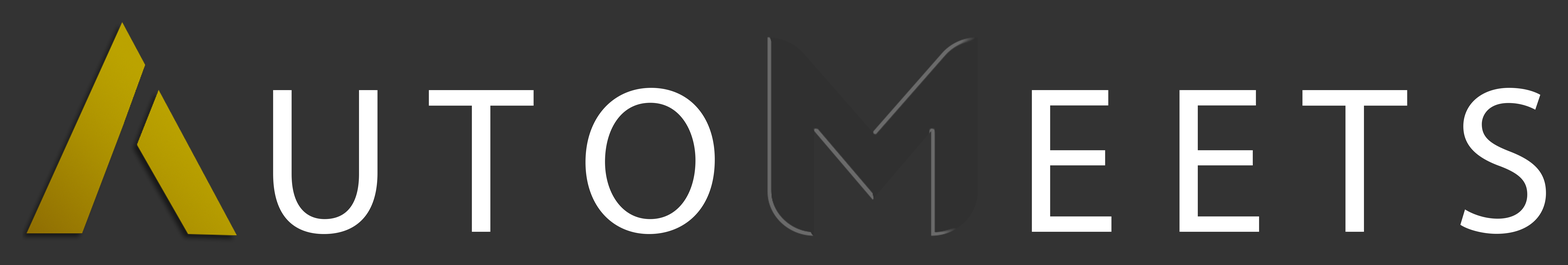
<style>
.page{position:relative;width:1568px;height:265px;background:#333333}
.page>*{position:absolute;margin:0}
.t1{font:209.9px "MyriadPro-Regular";color:#ffffff}
</style>
<div class="page">
<p class="t1" style="left:273px;top:88px;width:442px;height:146px">U T O</p>
<p class="t1" style="left:1032px;top:88px;width:514px;height:146px">E E T S</p>
</div>
